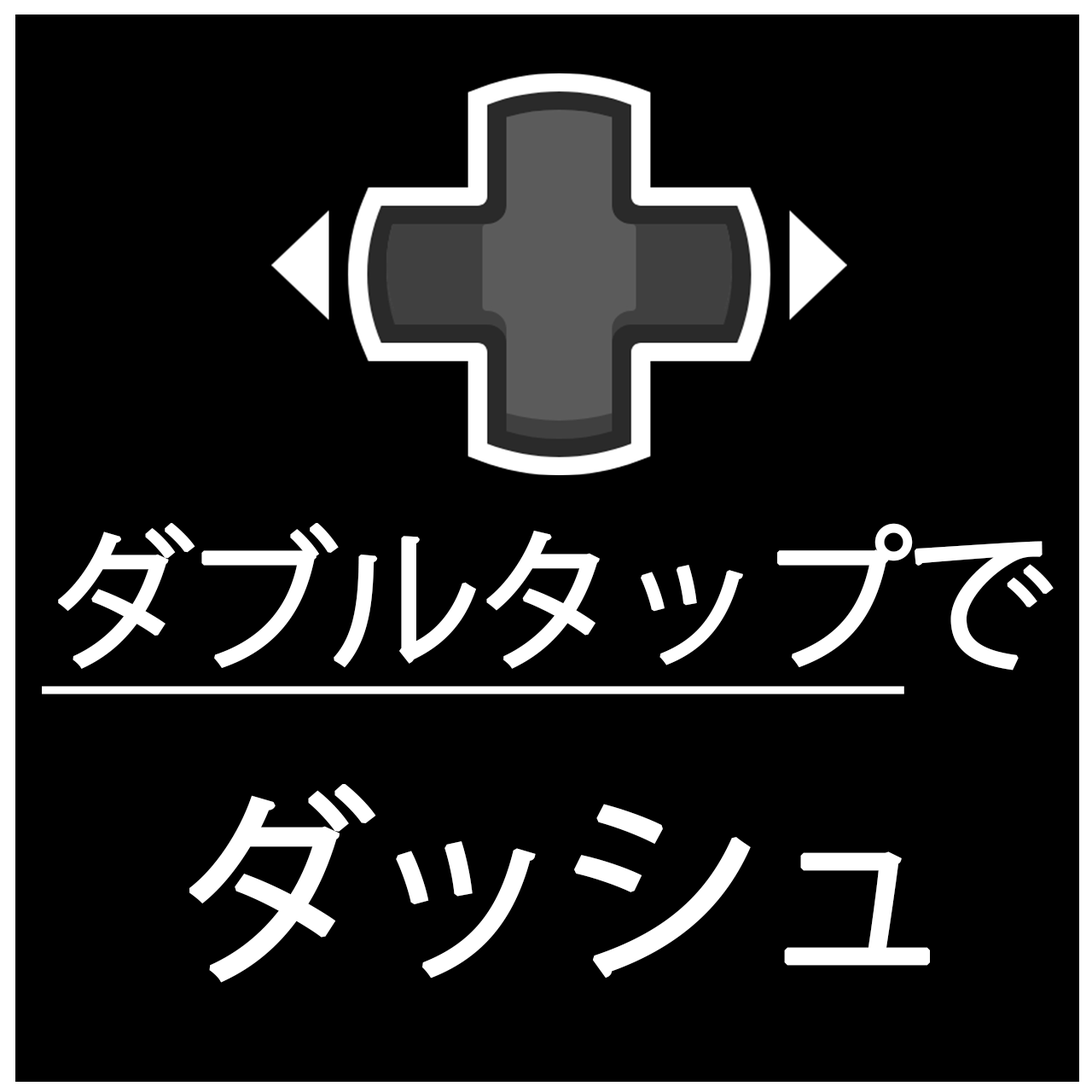
<style>
.page{position:relative;width:1092px;height:1092px;background:#000000}
.page>*{position:absolute;margin:0}
.t1{font:150.1px "KozGoPr6N-Regular";letter-spacing:-0.07em;color:#ffffff;font-weight:bold;text-decoration:underline}
.t2{font:150.1px "KozGoPr6N-Regular";letter-spacing:-0.07em;color:#ffffff;font-weight:bold}
.t3{font:204.7px "KozGoPr6N-Regular";letter-spacing:-0.07em;color:#ffffff;font-weight:bold}
</style>
<div class="page">
<p class="t1" style="left:42px;top:523px;width:1012px;height:171px">ダブルタップ<span class="t2">で</span></p>
<p class="t3" style="left:189px;top:784px;width:741px;height:199px">ダッシュ</p>
</div>
